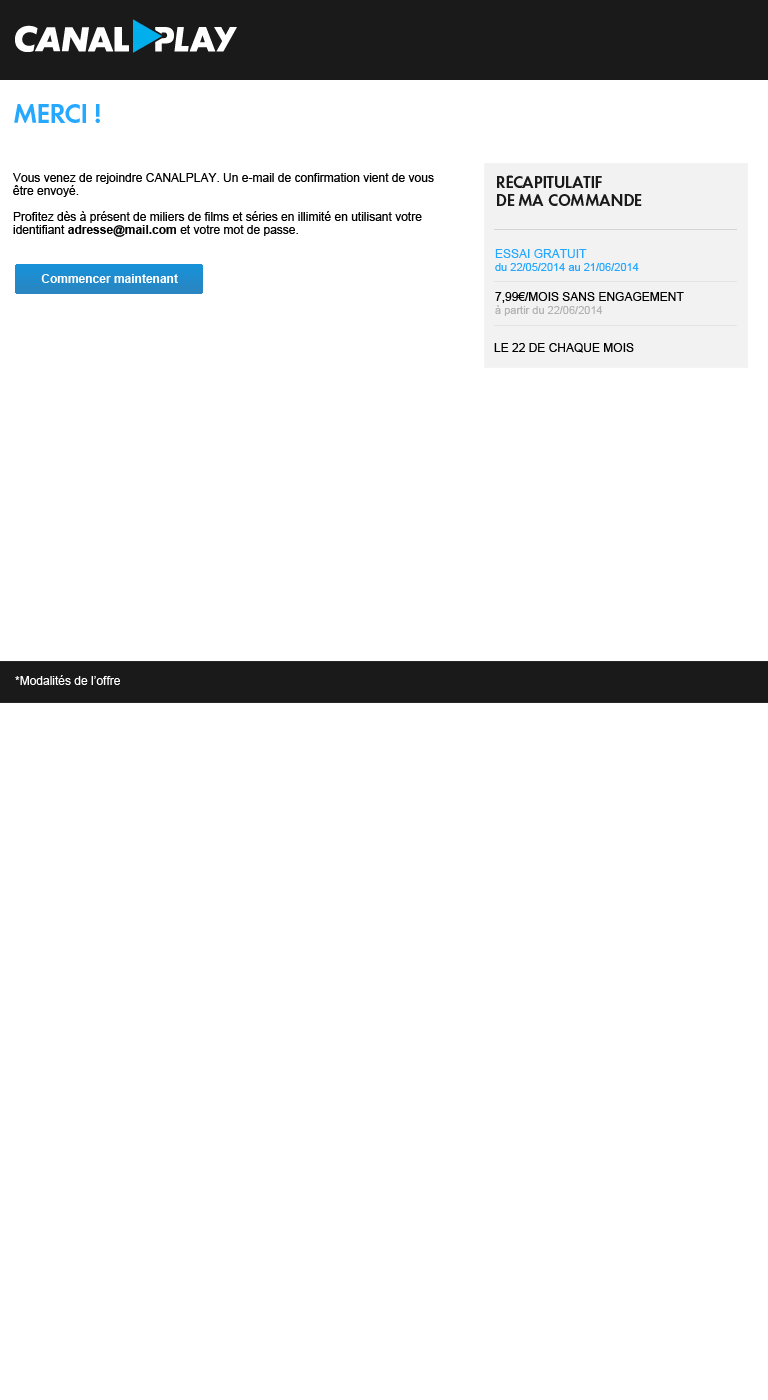
<style>
.page{position:relative;width:768px;height:1400px;background:#ffffff}
.page>*{position:absolute;margin:0}
.t1{font:25px "CanalDemiRomain";letter-spacing:-0.03em;color:#26a8ff;text-transform:uppercase}
.t2{font:12px/13px "ArialMT";color:#000000}
.t3{font:12px/13px "Arial-BoldMT";color:#000000}
.t4{font:15px "CanalDemiRomain";letter-spacing:-0.02em;color:#1a1a1a;text-transform:uppercase}
.t5{font:11px "ArialMT";color:#26a8ff}
.t6{font:12px "ArialMT";color:#26a8ff}
.t7{font:12px "Arial-BoldMT";color:#ffffff}
.t8{font:12px "ArialMT";color:#000000}
.t9{font:11px "ArialMT";color:#b3b3b3}
.t10{font:12px "ArialMT";color:#ffffff}
</style>
<div class="page">
<p class="t1" style="left:14px;top:104px;width:86px;height:19px">MERCI !</p>
<p class="t2" style="left:13px;top:173px;width:421px;height:64px">Vous venez de rejoindre CANALPLAY. Un e-mail de confirmation vient de vous<br>être envoyé. <br><br>Profitez dès à présent de miliers de films et séries en illimité en utilisant votre<br>identifiant <span class="t3">adresse@mail.com</span> et votre mot de passe.</p>
<p class="t4" style="left:497px;top:175px;width:145px;height:31px">récapitulatif<br>de ma commande</p>
<p class="t5" style="left:495px;top:249px;width:144px;height:22px"><span class="t6">ESSAI GRATUIT<br></span>du 22/05/2014 au 21/06/2014</p>
<p class="t7" style="left:41px;top:274px;width:137px;height:9px">Commencer maintenant</p>
<p class="t8" style="left:495px;top:292px;width:189px;height:24px">7,99€/MOIS SANS ENGAGEMENT<br><span class="t9">à partir du 22/06/2014</span></p>
<p class="t8" style="left:494px;top:343px;width:140px;height:10px">LE 22 DE CHAQUE MOIS</p>
<p class="t10" style="left:15px;top:675px;width:105px;height:10px">*Modalités de l’offre</p>
</div>
